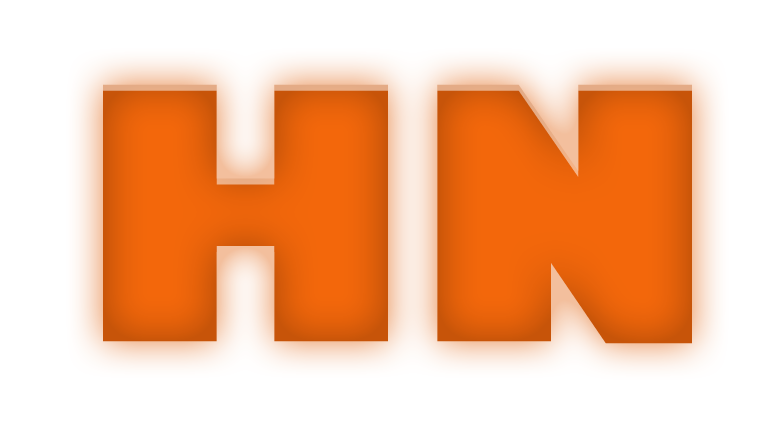
<style>
.page{position:relative;width:784px;height:446px;background:#ffffff}
.page>*{position:absolute;margin:0}
.t1{font:343.9px "GillSans-UltraBold";color:#f3670b}
</style>
<div class="page">
<p class="t1" style="left:103px;top:84px;width:589px;height:260px">HN</p>
</div>
